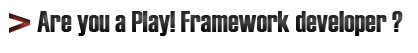
<style>
.page{position:relative;width:418px;height:53px;background:#ffffff}
.page>*{position:absolute;margin:0}
.t1{font:60px "Haettenschweiler"}
.t2{font:30px "Haettenschweiler";color:#343434}
</style>
<div class="page">
<p class="t1" style="left:9px;top:13px;width:22px;height:20px">&gt;</p>
<p class="t2" style="left:37px;top:11px;width:366px;height:25px">Are you a Play! Framework developer ?</p>
</div>
